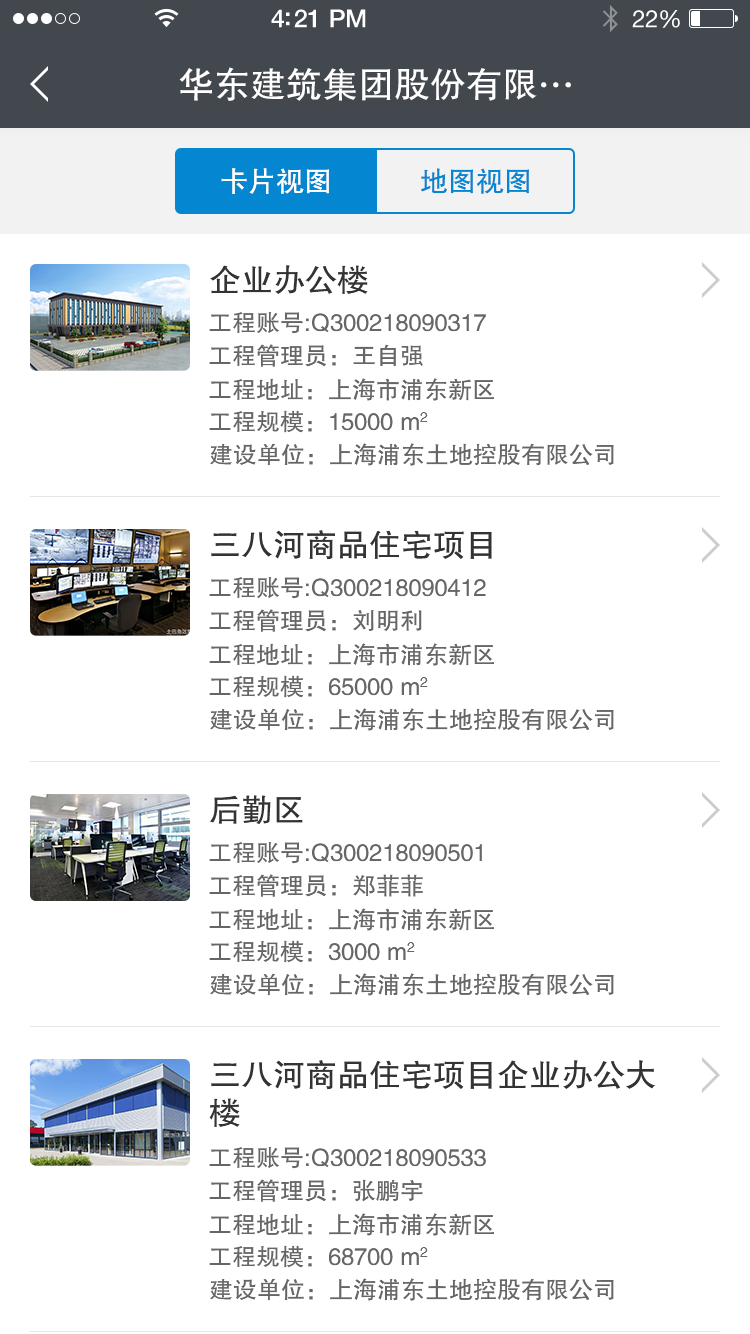
<style>
.page{position:relative;width:750px;height:1334px;background:#ffffff}
.page>*{position:absolute;margin:0}
.t1{font:36px "FZHTJW--GB1-0";color:#ffffff}
.t2{font:28px "FZHTJW--GB1-0";color:#ffffff}
.t3{font:28px "FZHTJW--GB1-0";color:#0487d0}
.t4{font:32px "FZHTJW--GB1-0";color:#333333}
.t5{font:24px "FZHTJW--GB1-0";color:#666666}
</style>
<div class="page">
<p class="t1" style="left:179px;top:67px;width:392px;height:34px">华东建筑集团股份有限…</p>
<p class="t2" style="left:221px;top:168px;width:108px;height:26px">卡片视图</p>
<p class="t3" style="left:421px;top:168px;width:108px;height:26px">地图视图</p>
<p class="t4" style="left:210px;top:265px;width:158px;height:29px">企业办公楼</p>
<p class="t5" style="left:209px;top:312px;width:277px;height:22px">工程账号:Q300218090317</p>
<p class="t5" style="left:209px;top:344px;width:214px;height:23px">工程管理员：王自强</p>
<p class="t5" style="left:209px;top:378px;width:285px;height:23px">工程地址：上海市浦东新区</p>
<p class="t5" style="left:209px;top:410px;width:219px;height:23px">工程规模：15000 m2</p>
<p class="t5" style="left:210px;top:443px;width:404px;height:23px">建设单位：上海浦东土地控股有限公司</p>
<p class="t4" style="left:211px;top:530px;width:281px;height:30px">三八河商品住宅项目</p>
<p class="t5" style="left:209px;top:577px;width:277px;height:22px">工程账号:Q300218090412</p>
<p class="t5" style="left:209px;top:609px;width:213px;height:23px">工程管理员：刘明利</p>
<p class="t5" style="left:209px;top:643px;width:285px;height:23px">工程地址：上海市浦东新区</p>
<p class="t5" style="left:209px;top:675px;width:219px;height:23px">工程规模：65000 m2</p>
<p class="t5" style="left:210px;top:708px;width:404px;height:23px">建设单位：上海浦东土地控股有限公司</p>
<p class="t4" style="left:209px;top:795px;width:94px;height:29px">后勤区</p>
<p class="t5" style="left:209px;top:842px;width:273px;height:22px">工程账号:Q300218090501</p>
<p class="t5" style="left:209px;top:874px;width:214px;height:23px">工程管理员：郑菲菲</p>
<p class="t5" style="left:209px;top:908px;width:285px;height:23px">工程地址：上海市浦东新区</p>
<p class="t5" style="left:209px;top:940px;width:206px;height:23px">工程规模：3000 m2</p>
<p class="t5" style="left:210px;top:973px;width:404px;height:23px">建设单位：上海浦东土地控股有限公司</p>
<p class="t4" style="left:209px;top:1060px;width:447px;height:67px">三八河商品住宅项目企业办公大<br>楼</p>
<p class="t5" style="left:209px;top:1147px;width:277px;height:22px">工程账号:Q300218090533</p>
<p class="t5" style="left:209px;top:1179px;width:214px;height:23px">工程管理员：张鹏宇</p>
<p class="t5" style="left:209px;top:1213px;width:285px;height:23px">工程地址：上海市浦东新区</p>
<p class="t5" style="left:209px;top:1245px;width:219px;height:23px">工程规模：68700 m2</p>
<p class="t5" style="left:210px;top:1278px;width:404px;height:23px">建设单位：上海浦东土地控股有限公司</p>
</div>
